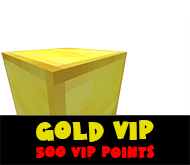
<style>
.page{position:relative;width:190px;height:165px;background:#ffffff}
.page>*{position:absolute;margin:0}
.t1{font:25px "HotMustardBTN";color:#e6de00}
.t2{font:15px "HotMustardBTN";color:#ff0000}
</style>
<div class="page">
<p class="t1" style="left:36px;top:120px;width:118px;height:22px">Gold VIP</p>
<p class="t2" style="left:36px;top:145px;width:119px;height:13px">500 VIP Points</p>
</div>
